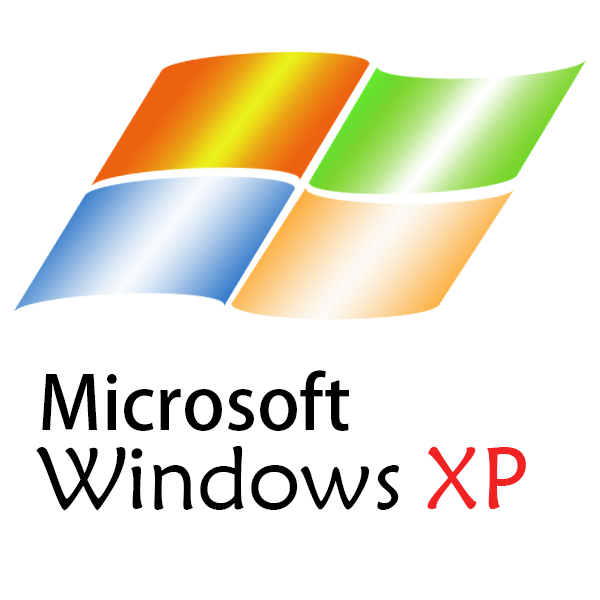
<style>
.page{position:relative;width:600px;height:600px;background:#ffffff}
.page>*{position:absolute;margin:0}
.t1{font:73.4px/73.4px "AdobeHeitiStd-Regular";color:#000000}
.t2{font:88px/73.4px "STXinwei";color:#000000}
.t3{font:88px/73.4px "STXinwei";color:#f02222}
</style>
<div class="page">
<p class="t1" style="left:36px;top:370px;width:490px;height:141px">Microsoft<br><span class="t2">Windows </span><span class="t3">XP</span></p>
</div>
